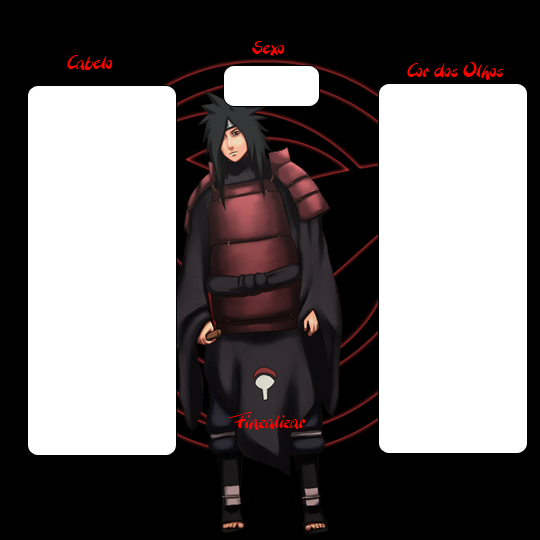
<style>
.page{position:relative;width:540px;height:540px;background:#000000}
.page>*{position:absolute;margin:0}
.t1{font:18px "BranchingMouse-Becker";color:#ff0000}
</style>
<div class="page">
<p class="t1" style="left:252px;top:41px;width:33px;height:15px">Sexo</p>
<p class="t1" style="left:67px;top:55px;width:46px;height:15px">Cabelo</p>
<p class="t1" style="left:407px;top:62px;width:96px;height:18px">Cor dos Olhos</p>
<p class="t1" style="left:229px;top:412px;width:76px;height:18px">Finzalizar</p>
</div>
